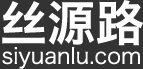
<style>
.page{position:relative;width:143px;height:69px;background:#333333}
.page>*{position:absolute;margin:0}
.t1{font:48px "HiraginoSansGB-W6";color:#ffffff}
.t2{font:22px "HiraginoSansGB-W3";color:#ffffff}
</style>
<div class="page">
<p class="t1" style="left:2px;top:0px;width:141px;height:46px">丝源路</p>
<p class="t2" style="left:2px;top:47px;width:138px;height:22px">siyuanlu.com</p>
</div>
